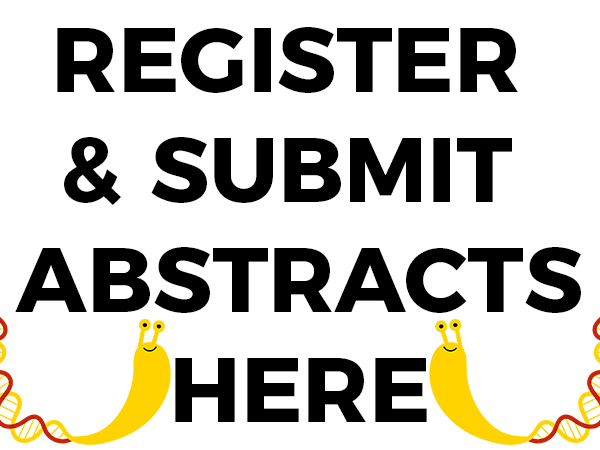
<style>
.page{position:relative;width:600px;height:450px;background:#ffffff}
.page>*{position:absolute;margin:0}
.t1{font:91.7px "Montserrat-Bold";color:#000000}
</style>
<div class="page">
<p class="t1" style="left:15px;top:27px;width:566px;height:395px;text-align:center">REGISTER <br>&amp; SUBMIT <br>ABSTRACTS<br>HERE</p>
</div>
